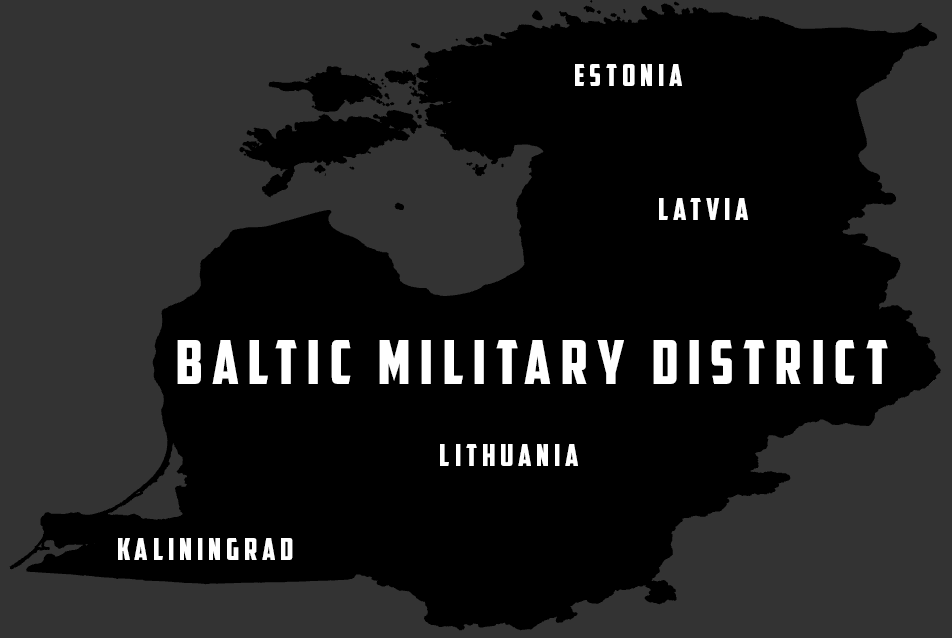
<style>
.page{position:relative;width:952px;height:638px;background:#000000}
.page>*{position:absolute;margin:0}
.t1{font:30.7px "AmericanCaptain";letter-spacing:0.16em;color:#ffffff}
.t2{font:61.3px "AmericanCaptain";letter-spacing:0.16em;color:#ffffff}
</style>
<div class="page">
<p class="t1" style="left:575px;top:64px;width:107px;height:22px">Estonia</p>
<p class="t1" style="left:659px;top:198px;width:89px;height:22px">Latvia</p>
<p class="t2" style="left:177px;top:340px;width:711px;height:44px">baltic Military District</p>
<p class="t1" style="left:440px;top:444px;width:138px;height:22px">lithuania</p>
<p class="t1" style="left:118px;top:538px;width:175px;height:22px">kaliningrad</p>
</div>
